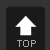
<style>
.page{position:relative;width:50px;height:50px;background:#1a1a1a}
.page>*{position:absolute;margin:0}
.t1{font:10px "ArialMT";color:#a4a4a4}
</style>
<div class="page">
<p class="t1" style="left:17px;top:40px;width:19px;height:7px">TOP</p>
</div>
